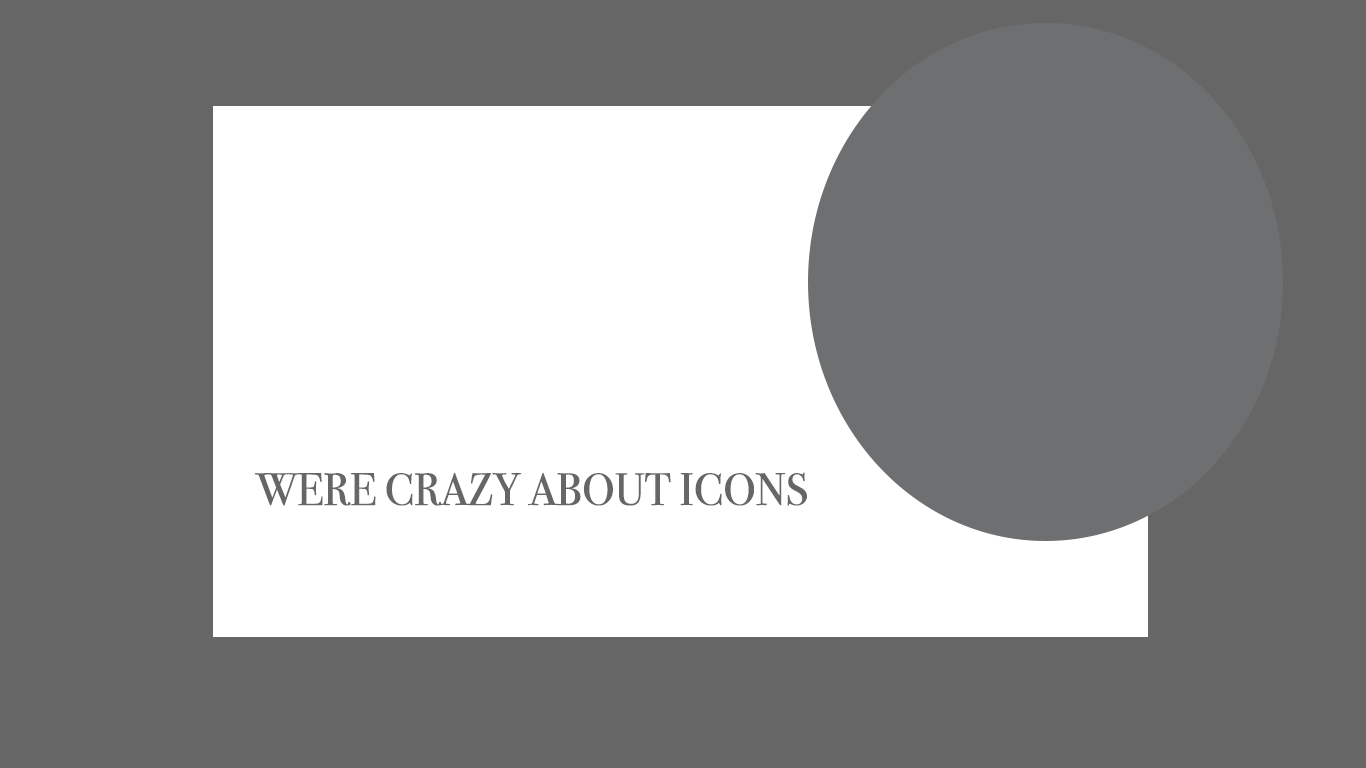
<style>
.page{position:relative;width:1366px;height:768px;background:#666666}
.page>*{position:absolute;margin:0}
.t1{font:45px "BodoniSvtyTwoITCTT-Book";letter-spacing:-0.025em;color:#666666;font-weight:bold}
</style>
<div class="page">
<p class="t1" style="left:254px;top:472px;width:553px;height:34px">WERE CRAZY ABOUT ICONS</p>
</div>
